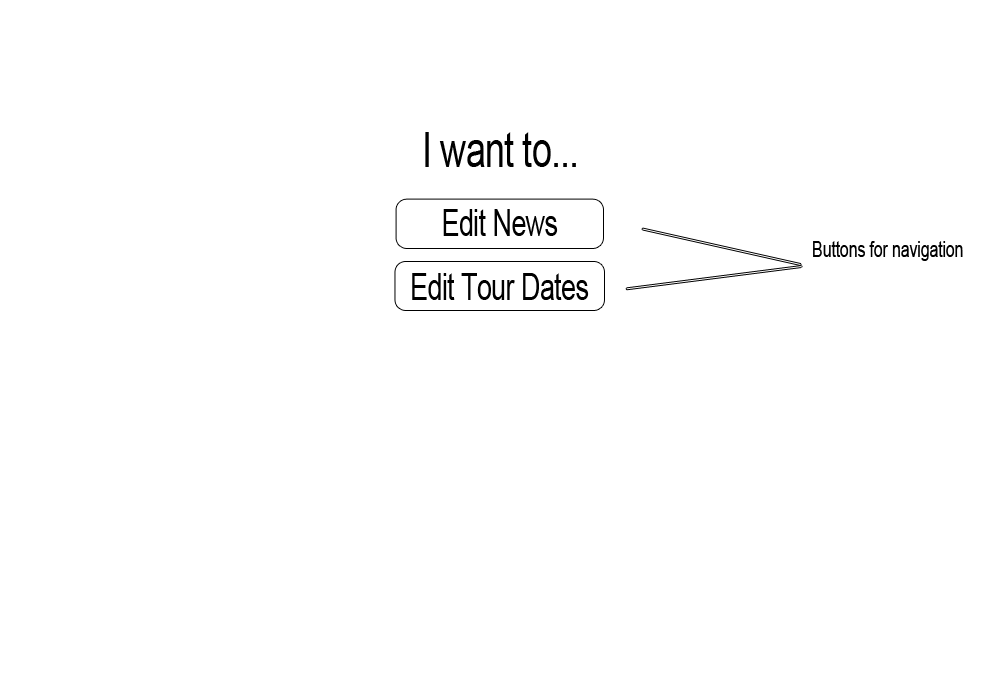
<style>
.page{position:relative;width:1000px;height:700px;background:#ffffff}
.page>*{position:absolute;margin:0}
.t1{font:48.7px "ArialMT";letter-spacing:-0.02em;color:#000000;scale:0.73 1}
.t2{font:36.5px "ArialMT";letter-spacing:-0.02em;color:#000000;scale:0.73 1}
.t3{font:22.3px "ArialMT";letter-spacing:-0.02em;color:#000000;scale:0.73 1}
</style>
<div class="page">
<p class="t1" style="left:425px;top:132px;width:151px;height:35px">I want to...</p>
<p class="t2" style="left:443px;top:209px;width:115px;height:27px">Edit News</p>
<p class="t3" style="left:813px;top:241px;width:150px;height:20px">Buttons for navigation</p>
<p class="t2" style="left:412px;top:273px;width:177px;height:27px">Edit Tour Dates</p>
</div>
